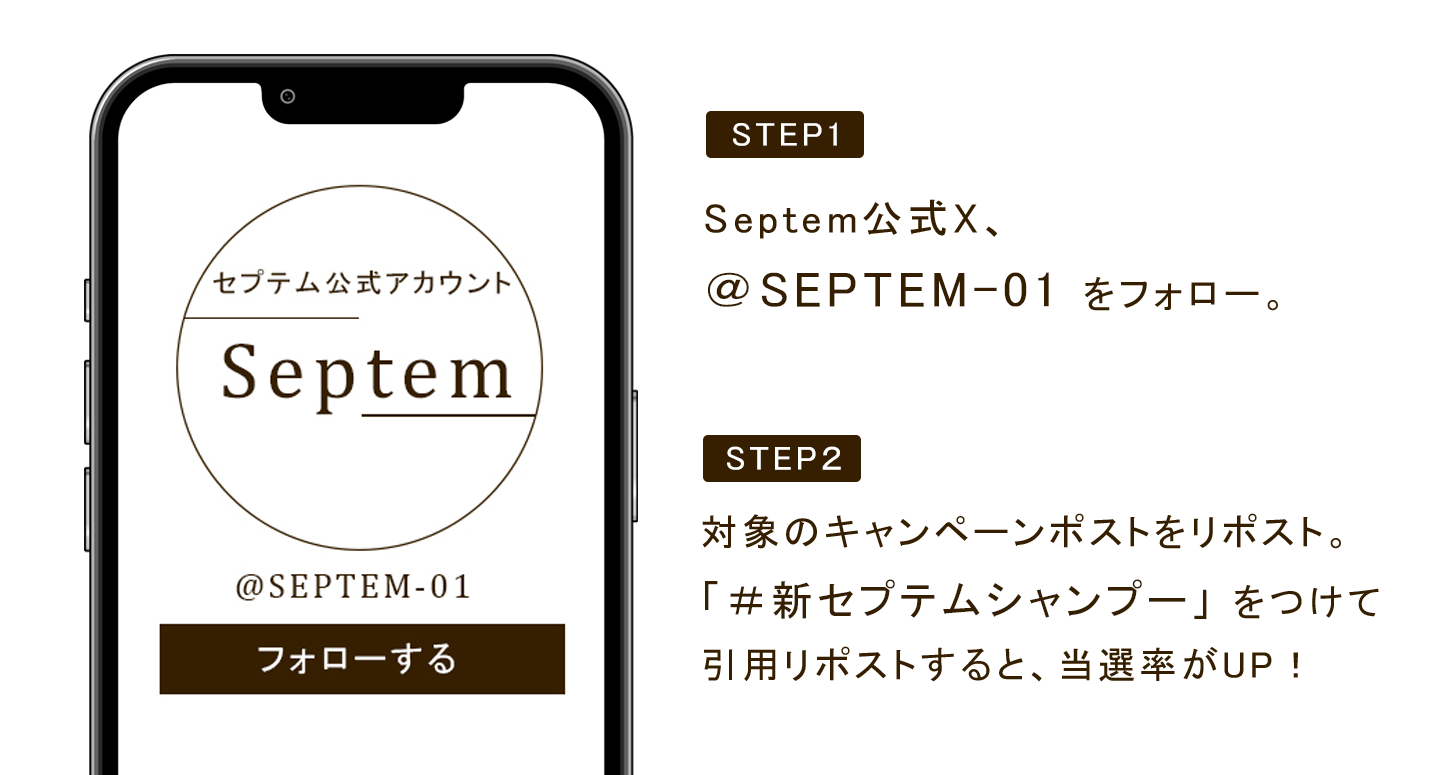
<style>
.page{position:relative;width:1433px;height:775px;background:#ffffff}
.page>*{position:absolute;margin:0}
.t1{font:33.6px "MS-PGothic";letter-spacing:0.1em;color:#ffffff}
.t2{font:41.7px/66.6px "MS-PGothic";letter-spacing:0.1em;color:#361f00}
.t3{font:50px/66.6px "MS-PGothic";letter-spacing:0.1em;color:#361f00}
.t4{font:37.5px/66.6px "MS-PGothic";letter-spacing:0.1em;color:#361f00}
.t5{font:33.9px "MS-PGothic";letter-spacing:0.1em;color:#ffffff}
.t6{font:37.5px/66.7px "MS-PGothic";letter-spacing:0.1em;color:#361f00}
.t7{font:41.7px/66.7px "MS-PGothic";letter-spacing:0.1em;color:#361f00}
</style>
<div class="page">
<p class="t1" style="left:733px;top:122px;width:104px;height:24px">STEP1</p>
<p class="t2" style="left:705px;top:199px;width:573px;height:112px">Septem公式X、<br><span class="t3">＠SEPTEM-01 </span><span class="t4">をフォロー。</span></p>
<p class="t5" style="left:727px;top:446px;width:114px;height:24px">STEP２</p>
<p class="t6" style="left:702px;top:513px;width:677px;height:169px">対象のキャンペーンポストをリポスト。<br><span class="t7">「＃新セプテムシャンプー」 </span>をつけて<br>引用リポストすると、当選率がUP！</p>
</div>
